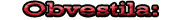
<style>
.page{position:relative;width:180px;height:20px;background:#ffffff}
.page>*{position:absolute;margin:0}
.t1{font:18px "Rockwell";scale:1.63 1}
</style>
<div class="page">
<p class="t1" style="left:24px;top:2px;width:133px;height:14px">Obvestila:</p>
</div>
